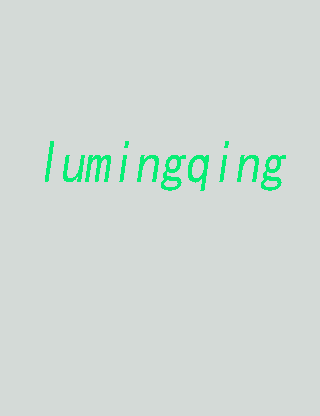
<style>
.page{position:relative;width:320px;height:416px;background:#d4dad7}
.page>*{position:absolute;margin:0}
.t1{font:61px "SimHei";color:#08ee74;font-style:italic;scale:0.82 1}
</style>
<div class="page">
<p class="t1" style="left:45px;top:141px;width:241px;height:50px">lumingqing</p>
</div>
